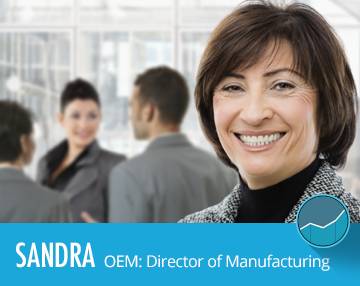
<style>
.page{position:relative;width:360px;height:286px}
.page>*{position:absolute;margin:0}
.t1{font:32px "Futura-CondensedMedium";letter-spacing:-0.01em;color:#ffffff}
.t2{font:16px "OpenSans";letter-spacing:-0.025em;color:#ffffff}
</style>
<div class="page">
<p class="t1" style="left:16px;top:242px;width:79px;height:26px">SANDRA</p>
<p class="t2" style="left:104px;top:254px;width:226px;height:17px">OEM: Director of Manufacturing</p>
</div>
